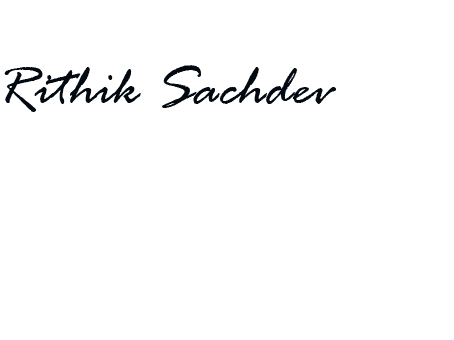
<style>
.page{position:relative;width:454px;height:340px;background:#ffffff}
.page>*{position:absolute;margin:0}
.t1{font:60px "RageItalic";color:#030910}
</style>
<div class="page">
<p class="t1" style="left:4px;top:65px;width:332px;height:47px">Rithik Sachdev</p>
</div>
